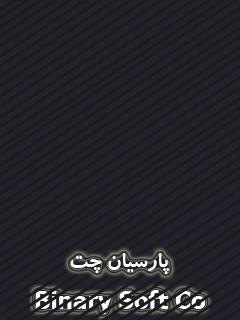
<style>
.page{position:relative;width:240px;height:320px;background:#21222e}
.page>*{position:absolute;margin:0}
.t1{font:24px "BKoodakBold";color:#ffffff}
</style>
<div class="page">
<p class="t1" style="left:70px;top:253px;width:100px;height:21px">پارسیان چت</p>
<p class="t1" style="left:35px;top:290px;width:171px;height:24px">Binary Soft Co</p>
</div>
